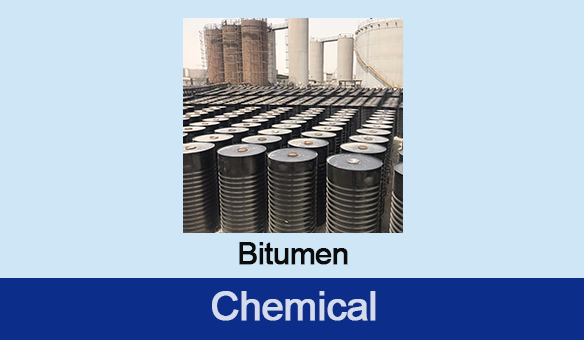
<style>
.page{position:relative;width:584px;height:340px;background:#cee6f6}
.page>*{position:absolute;margin:0}
.t1{font:30.6px "ArialMT";letter-spacing:-0.03em;color:#0b0b0b;font-weight:bold}
.t2{font:40.2px "ArialMT";letter-spacing:-0.03em;color:#d4dbed;font-weight:bold}
</style>
<div class="page">
<p class="t1" style="left:239px;top:242px;width:109px;height:23px">Bitumen</p>
<p class="t2" style="left:212px;top:291px;width:164px;height:30px">Chemical</p>
</div>
